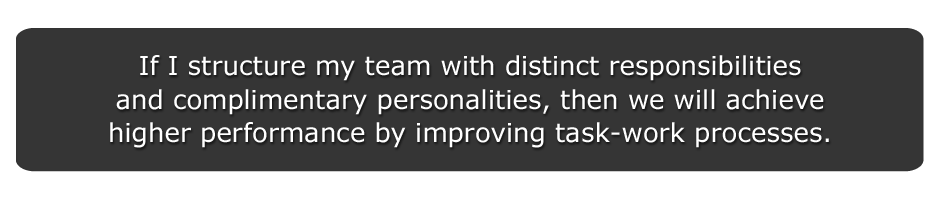
<style>
.page{position:relative;width:940px;height:200px;background:#353535}
.page>*{position:absolute;margin:0}
.t1{font:26px/33.6px "Verdana";color:#ffffff}
</style>
<div class="page">
<p class="t1" style="left:110px;top:55px;width:719px;height:93px;text-align:center">If I structure my team with distinct responsibilities<br>and complimentary personalities, then we will achieve<br>higher performance by improving task-work processes.</p>
</div>
